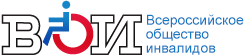
<style>
.page{position:relative;width:244px;height:55px;background:#ffffff}
.page>*{position:absolute;margin:0}
.t1{font:14px/14px "ArialMT";color:#1478c2}
</style>
<div class="page">
<p class="t1" style="left:146px;top:14px;width:98px;height:41px">Всероссийское<br>общество <br>инвалидов</p>
</div>
